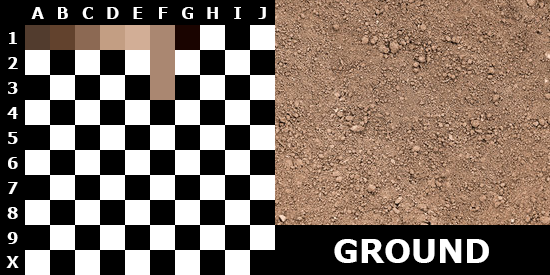
<style>
.page{position:relative;width:550px;height:275px;background:#000000}
.page>*{position:absolute;margin:0}
.t1{font:16px "Verdana-Bold";color:#ffffff}
.t2{font:32px "Verdana-Bold";color:#ffffff}
</style>
<div class="page">
<p class="t1" style="left:31px;top:7px;width:13px;height:12px">A</p>
<p class="t1" style="left:58px;top:7px;width:10px;height:12px">B</p>
<p class="t1" style="left:82px;top:7px;width:11px;height:12px">C</p>
<p class="t1" style="left:107px;top:7px;width:12px;height:12px">D</p>
<p class="t1" style="left:133px;top:7px;width:10px;height:12px">E</p>
<p class="t1" style="left:159px;top:7px;width:9px;height:12px">F</p>
<p class="t1" style="left:182px;top:7px;width:11px;height:12px">G</p>
<p class="t1" style="left:207px;top:7px;width:11px;height:12px">H</p>
<p class="t1" style="left:234px;top:7px;width:7px;height:12px">I</p>
<p class="t1" style="left:258px;top:7px;width:8px;height:12px">J</p>
<p class="t1" style="left:9px;top:32px;width:8px;height:12px">1</p>
<p class="t1" style="left:8px;top:57px;width:10px;height:12px">2</p>
<p class="t1" style="left:8px;top:82px;width:10px;height:12px">3</p>
<p class="t1" style="left:7px;top:107px;width:11px;height:12px">4</p>
<p class="t1" style="left:8px;top:132px;width:10px;height:12px">5</p>
<p class="t1" style="left:8px;top:157px;width:10px;height:12px">6</p>
<p class="t1" style="left:8px;top:182px;width:10px;height:12px">7</p>
<p class="t1" style="left:7px;top:207px;width:11px;height:12px">8</p>
<p class="t1" style="left:7px;top:232px;width:11px;height:12px">9</p>
<p class="t2" style="left:334px;top:239px;width:155px;height:24px">GROUND</p>
<p class="t1" style="left:6px;top:256px;width:13px;height:12px">X</p>
</div>
